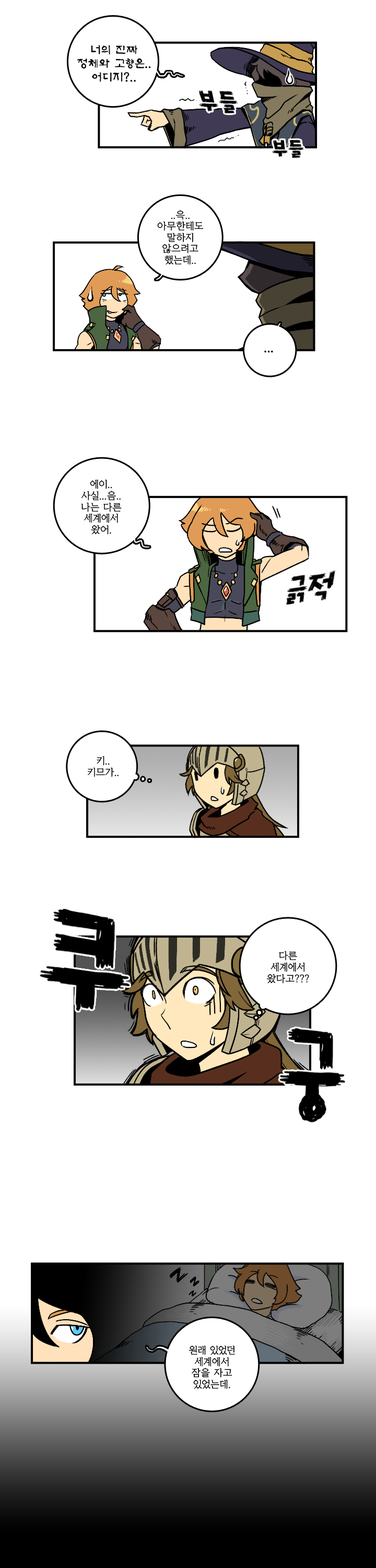
<style>
.page{position:relative;width:376px;height:1568px;background:#ffffff}
.page>*{position:absolute;margin:0}
.t1{font:11.5px "KoreanAS-R";color:#000000}
.t2{font:9.4px "KoreanYMJ-B";color:#000000}
</style>
<div class="page">
<p class="t1" style="left:77px;top:45px;width:74px;height:37px;text-align:center">너의 진짜<br>정체와 고향은..<br>어디지?..</p>
<p class="t2" style="left:157px;top:210px;width:47px;height:55px;text-align:center">..윽..<br>아무한테도<br>말하지<br>않으려고<br>했는데..</p>
<p class="t1" style="left:264px;top:350px;width:9px;height:3px">...</p>
<p class="t2" style="left:81px;top:479px;width:41px;height:56px;text-align:center">에이..<br>사실...음..<br>나는 다른<br>세계에서<br>왔어.</p>
<p class="t2" style="left:88px;top:756px;width:31px;height:21px;text-align:center">키..<br>키므가..</p>
<p class="t2" style="left:267px;top:951px;width:42px;height:33px;text-align:center">다른<br>세계에서<br>왔다고???</p>
<p class="t2" style="left:189px;top:1345px;width:46px;height:44px;text-align:center">원래 있었던<br>세계에서<br>잠을 자고<br>있었는데.</p>
</div>
